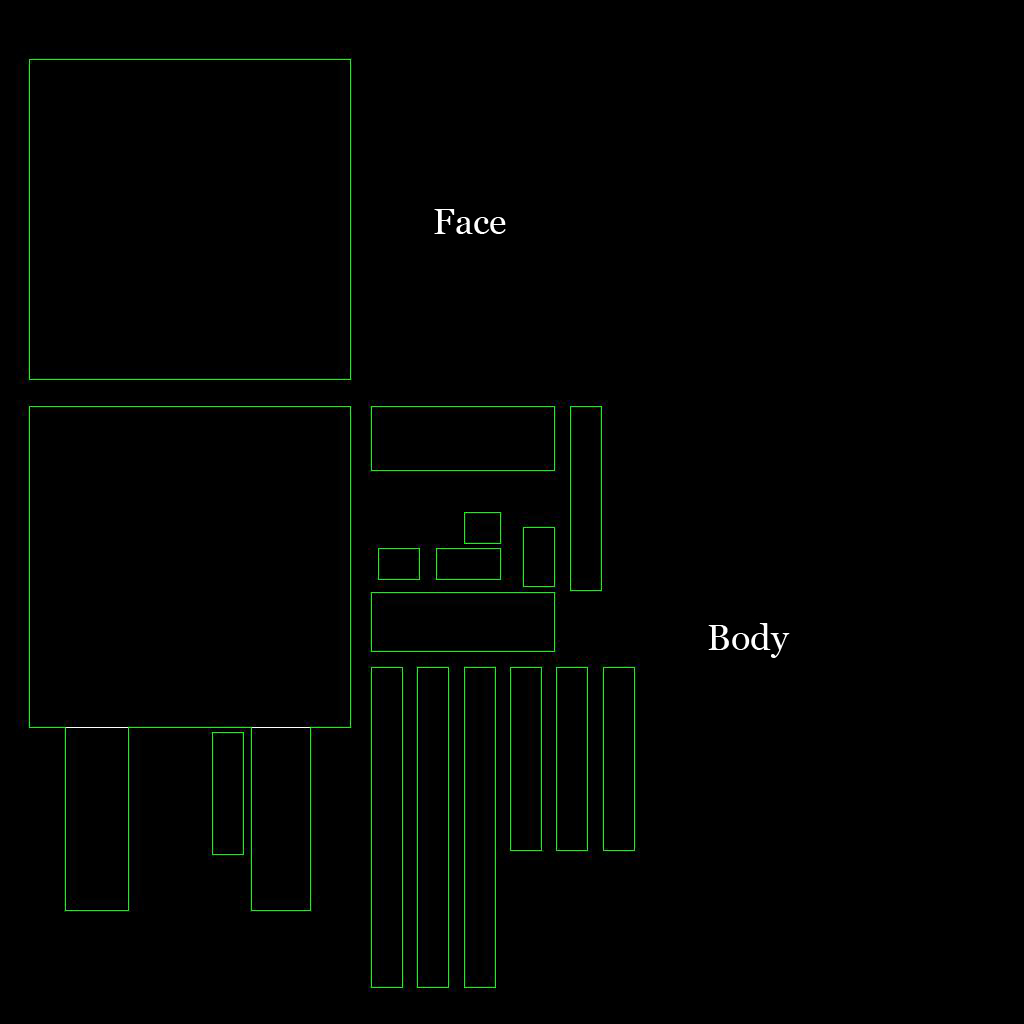
<style>
.page{position:relative;width:1024px;height:1024px;background:#000000}
.page>*{position:absolute;margin:0}
.t1{font:36px "Georgia";color:#ffffff}
</style>
<div class="page">
<p class="t1" style="left:434px;top:209px;width:72px;height:25px">Face</p>
<p class="t1" style="left:708px;top:623px;width:82px;height:35px">Body</p>
</div>
